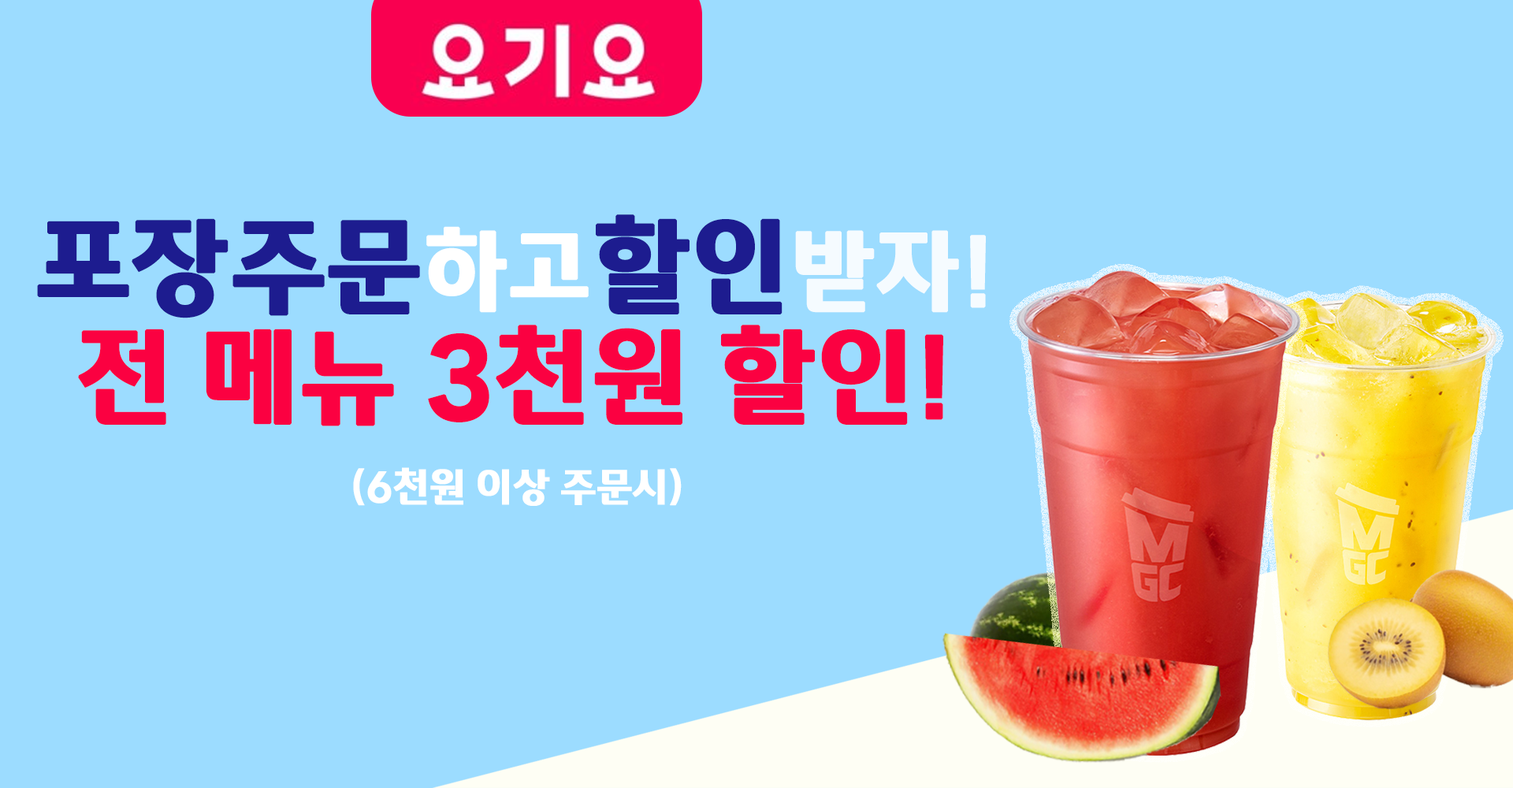
<style>
.page{position:relative;width:1513px;height:788px;background:#9cdcff}
.page>*{position:absolute;margin:0}
.t1{font:108.8px/110.3px "TTWelcomeBold";color:#fb0141;font-weight:bold}
.t2{font:108.8px/137.1px "TTWelcomeBold";color:#1d1c8f;font-weight:bold}
.t3{font:93px/137.1px "TTWelcomeBold";color:#ffffff;font-weight:bold}
.t4{font:93px/137.1px "TTWelcomeBold";color:#f5fbff;font-weight:bold}
.t5{font:41px/89.8px "TTWelcomeBold";color:#ffffff;font-weight:bold}
</style>
<div class="page">
<p class="t1" style="left:37px;top:214px;width:949px;height:292px;text-align:center"><span class="t2">포장주문</span><span class="t3">하고</span><span class="t2">할인</span><span class="t4">받자!<br></span>전 메뉴 3천원 할인!<br><span class="t5">(6천원 이상 주문시)</span></p>
</div>
